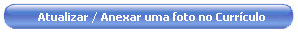
<style>
.page{position:relative;width:298px;height:34px;background:#ffffff}
.page>*{position:absolute;margin:0}
.t1{font:11px "Tahoma-Bold";color:#ffffff}
</style>
<div class="page">
<p class="t1" style="left:38px;top:12px;width:227px;height:11px">Atualizar / Anexar uma foto no Currículo</p>
</div>
